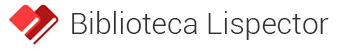
<style>
.page{position:relative;width:341px;height:50px;background:#ffffff}
.page>*{position:absolute;margin:0}
.t1{font:30px "Roboto-Light";color:#323232}
</style>
<div class="page">
<p class="t1" style="left:72px;top:11px;width:257px;height:29px">Biblioteca Lispector</p>
</div>
